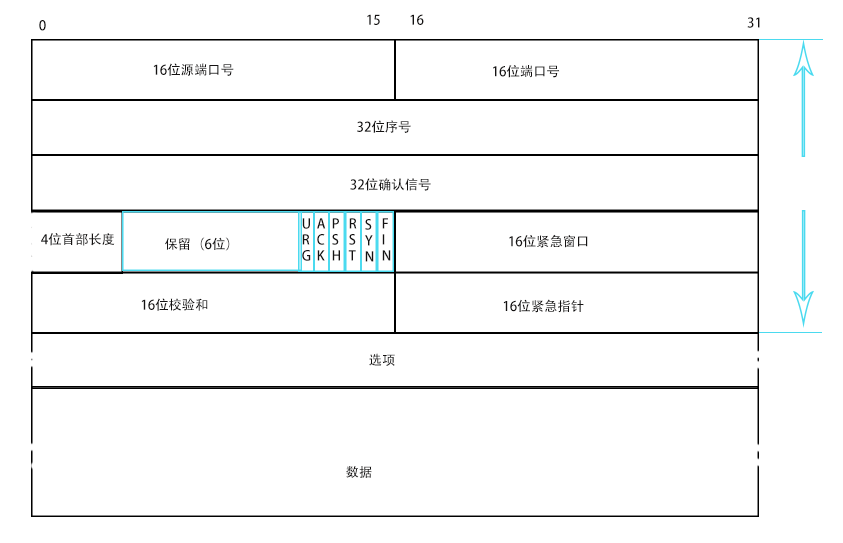
<style>
.page{position:relative;width:843px;height:543px;background:#ffffff}
.page>*{position:absolute;margin:0}
.t1{font:13.3px "AdobeHeitiStd-Regular";color:#141212}
</style>
<div class="page">
<p class="t1" style="left:367px;top:14px;width:13px;height:11px">15</p>
<p class="t1" style="left:410px;top:14px;width:14px;height:11px">16</p>
<p class="t1" style="left:747px;top:17px;width:13px;height:11px">31</p>
<p class="t1" style="left:39px;top:20px;width:7px;height:11px">0</p>
<p class="t1" style="left:153px;top:63px;width:81px;height:13px">16位源端口号</p>
<p class="t1" style="left:493px;top:65px;width:67px;height:13px">16位端口号</p>
<p class="t1" style="left:357px;top:120px;width:54px;height:13px">32位序号</p>
<p class="t1" style="left:350px;top:178px;width:81px;height:13px">32位确认信号</p>
<p class="t1" style="left:302px;top:218px;width:9px;height:43px">U<br>R<br>G</p>
<p class="t1" style="left:317px;top:218px;width:9px;height:43px">A<br>C<br>K</p>
<p class="t1" style="left:332px;top:218px;width:8px;height:43px">P<br>S<br>H</p>
<p class="t1" style="left:348px;top:218px;width:9px;height:43px">R<br>S<br>T</p>
<p class="t1" style="left:365px;top:219px;width:9px;height:43px">S<br>Y<br>N</p>
<p class="t1" style="left:382px;top:218px;width:9px;height:43px">F<br>I<br>N</p>
<p class="t1" style="left:41px;top:233px;width:74px;height:13px">4位首部长度</p>
<p class="t1" style="left:165px;top:237px;width:65px;height:14px">保留（6位）</p>
<p class="t1" style="left:509px;top:234px;width:79px;height:14px">16位紧急窗口</p>
<p class="t1" style="left:141px;top:298px;width:67px;height:13px">16位校验和</p>
<p class="t1" style="left:503px;top:299px;width:81px;height:14px">16位紧急指针</p>
<p class="t1" style="left:369px;top:353px;width:26px;height:13px">选项</p>
<p class="t1" style="left:346px;top:466px;width:26px;height:12px">数据</p>
</div>
